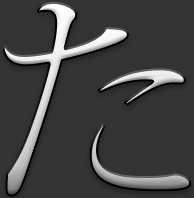
<style>
.page{position:relative;width:194px;height:198px;background:#333333}
.page>*{position:absolute;margin:0}
.t1{font:233.3px "AdobeKaitiStd-Regular"}
</style>
<div class="page">
<p class="t1" style="left:2px;top:2px;width:190px;height:195px">た</p>
</div>
